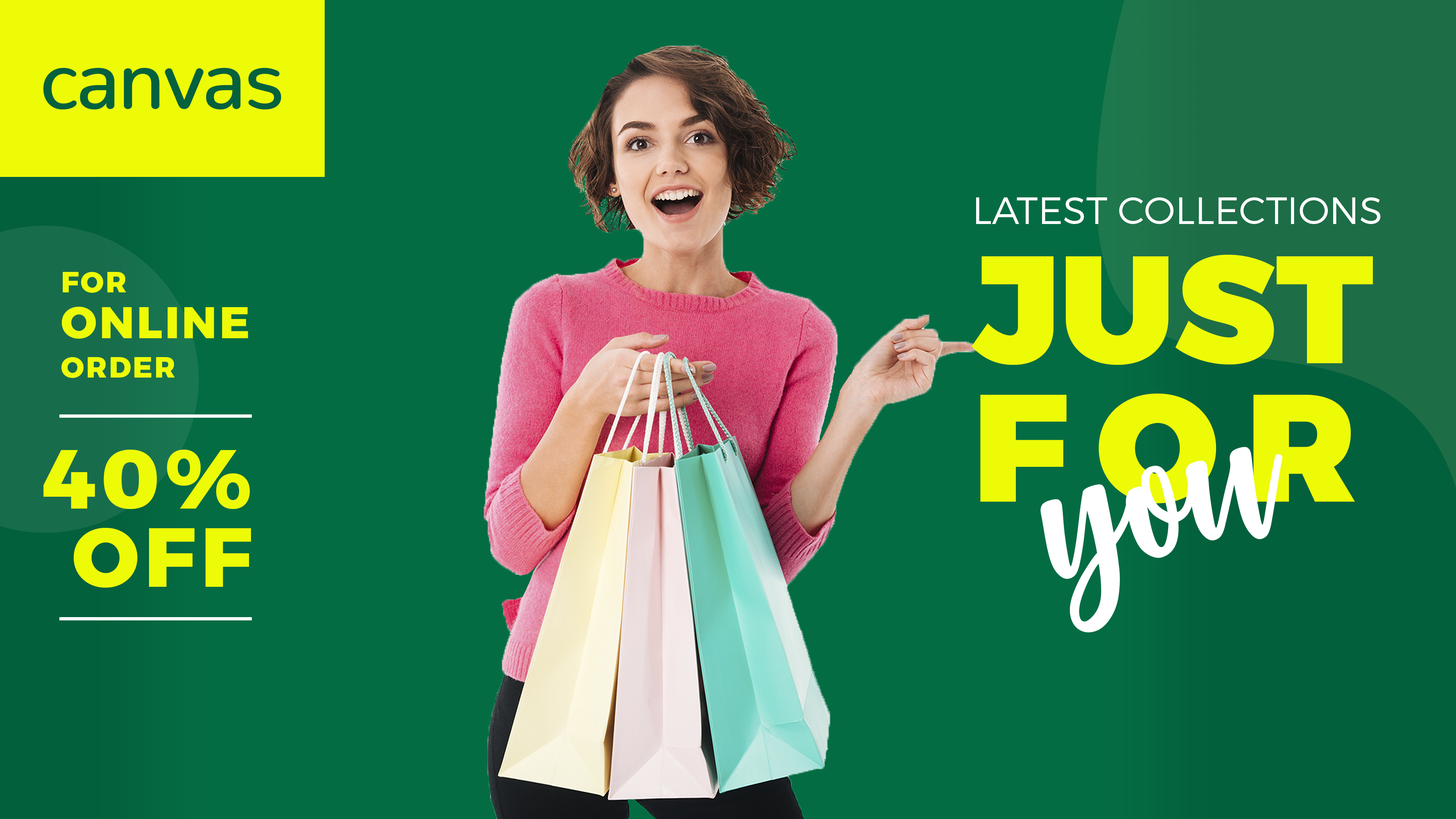
<style>
.page{position:relative;width:1456px;height:819px;background:#046c43}
.page>*{position:absolute;margin:0}
.t1{font:81.5px "Nunito-Regular";letter-spacing:-0.04em;color:#03613d;font-weight:bold}
.t2{font:38.1px "Montserrat-Light";color:#ffffff;text-transform:uppercase}
.t3{font:152.5px/146.4px "Montserrat-Black";color:#edfb07;text-transform:uppercase}
.t4{font:152.5px/138.4px "Montserrat-Black";letter-spacing:0.18em;color:#edfb07;text-transform:uppercase}
.t5{font:44.4px/46.1px "Montserrat-ExtraBold";letter-spacing:0.06em;color:#edfb07;text-transform:uppercase}
.t6{font:29px/39.2px "Montserrat-ExtraBold";letter-spacing:0.06em;color:#edfb07;text-transform:uppercase}
.t7{font:83.5px/78.3px "Montserrat-ExtraBold";letter-spacing:0.06em;color:#edfb07;text-transform:uppercase}
.t8{font:172.5px "Gabelisa";color:#ffffff}
</style>
<div class="page">
<p class="t1" style="left:43px;top:68px;width:238px;height:42px">canvas</p>
<p class="t2" style="left:976px;top:197px;width:405px;height:27px">Latest Collections</p>
<p class="t3" style="left:972px;top:254px;width:401px;height:249px">Just<br><span class="t4">for</span></p>
<p class="t5" style="left:61px;top:272px;width:187px;height:106px"><span class="t6">For<br></span>online<br><span class="t6">order</span></p>
<p class="t7" style="left:43px;top:450px;width:208px;height:138px;text-align:right">40%<br>Off</p>
<p class="t8" style="left:1040px;top:447px;width:242px;height:186px;rotate:-15deg">you</p>
</div>
